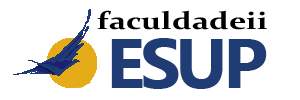
<style>
.page{position:relative;width:300px;height:100px;background:#ffffff}
.page>*{position:absolute;margin:0}
.t1{font:24.7px "Constantia-Bold";color:#000000;scale:1.3 1}
.t2{font:70px "MicrosoftNewTaiLue-Bold";letter-spacing:-0.075em;color:#1f3c75;text-transform:uppercase;scale:1.04 1}
</style>
<div class="page">
<p class="t1" style="left:97px;top:10px;width:170px;height:20px">faculdadeii</p>
<p class="t2" style="left:111px;top:38px;width:156px;height:51px">ESUP</p>
</div>
